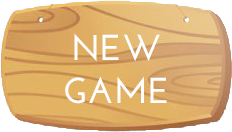
<style>
.page{position:relative;width:232px;height:132px}
.page>*{position:absolute;margin:0}
.t1{font:36px "JosefinSans-Bold";color:#fefefe}
</style>
<div class="page">
<p class="t1" style="left:65px;top:33px;width:102px;height:71px;text-align:center">NEW<br>GAME</p>
</div>
